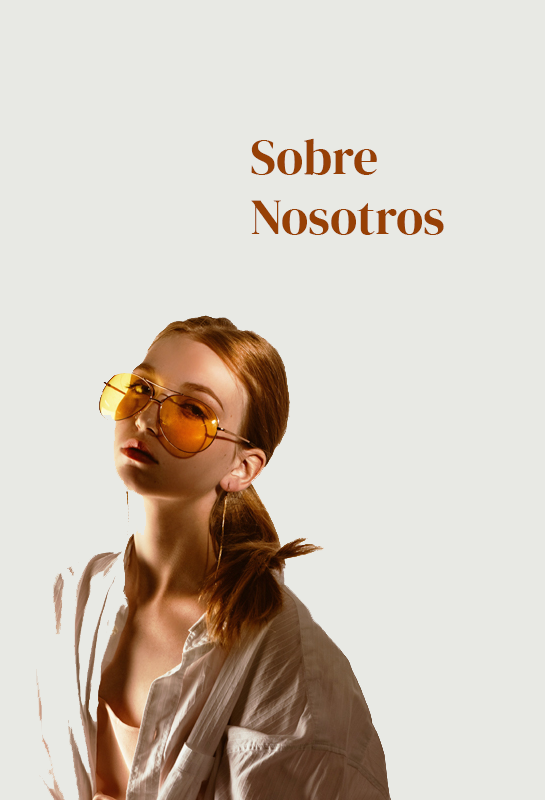
<style>
.page{position:relative;width:545px;height:800px;background:#e8e9e4}
.page>*{position:absolute;margin:0}
.t1{font:50px "DMSerifDisplay-Regular";color:#974005}
</style>
<div class="page">
<p class="t1" style="left:251px;top:138px;width:193px;height:97px">Sobre<br>Nosotros</p>
</div>
